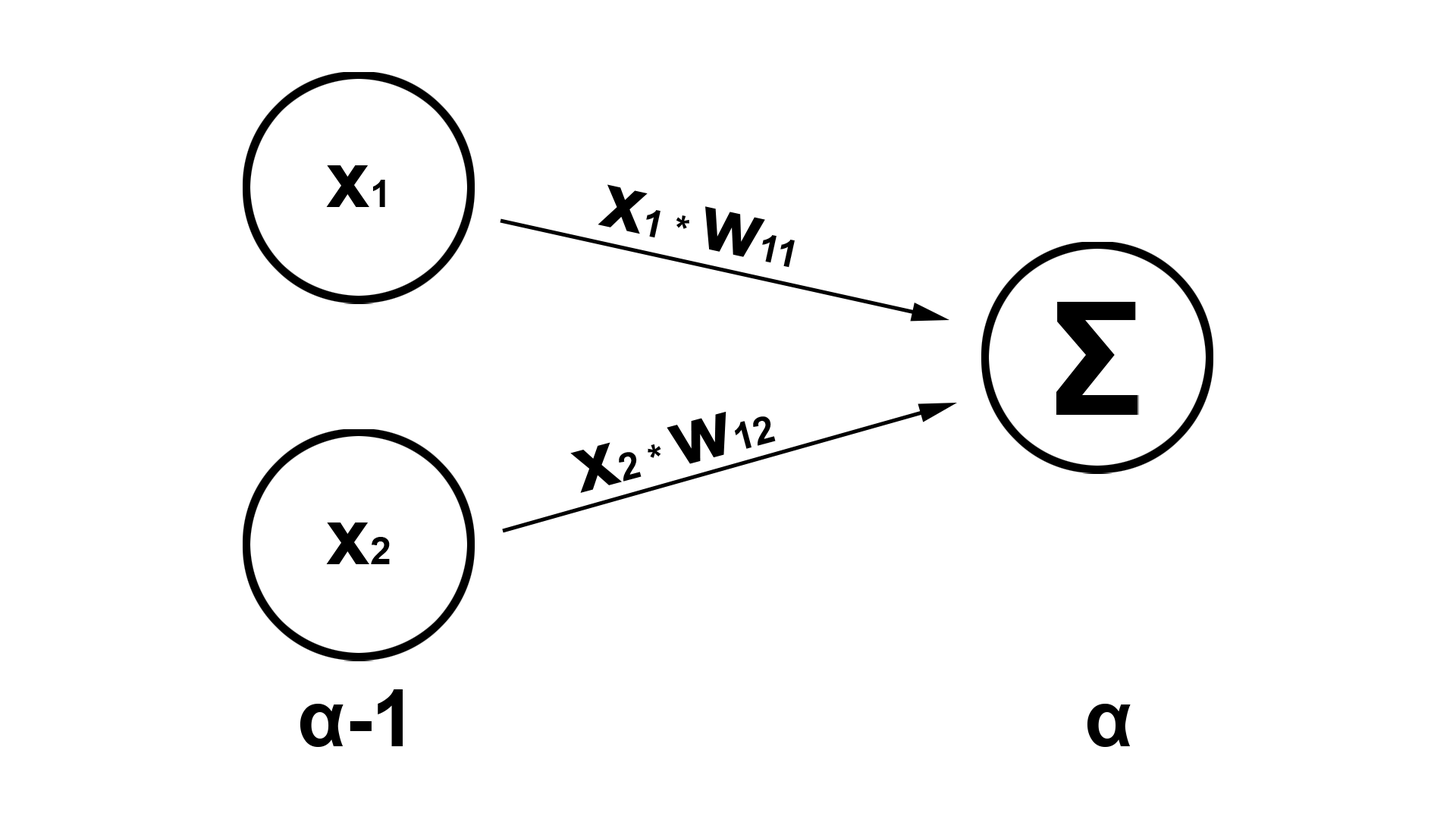
<style>
.page{position:relative;width:1456px;height:819px;background:#ffffff}
.page>*{position:absolute;margin:0}
.t1{font:79px "Arial-BoldMT";color:#000000}
.t2{font:37.9px "Arial-BoldMT";color:#000000}
</style>
<div class="page">
<p class="t1" style="left:326px;top:165px;width:59px;height:42px">x<span class="t2">1</span></p>
<p class="t2" style="left:598px;top:184px;width:197px;height:84px;rotate:12deg"><span class="t1">x</span>1 * <span class="t1">w</span>11</p>
<p class="t2" style="left:570px;top:411px;width:206px;height:82px;rotate:-15deg"><span class="t1">x</span>2 * <span class="t1">w</span>12</p>
<p class="t1" style="left:326px;top:522px;width:64px;height:42px">x<span class="t2">2</span></p>
<p class="t1" style="left:300px;top:689px;width:103px;height:58px">α-1</p>
<p class="t1" style="left:1087px;top:704px;width:44px;height:43px">α</p>
</div>
